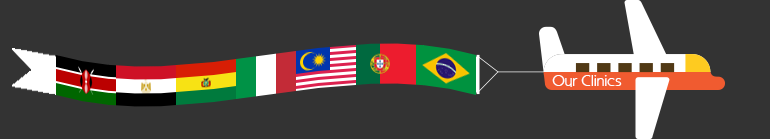
<style>
.page{position:relative;width:770px;height:139px;background:#333333}
.page>*{position:absolute;margin:0}
.t1{font:14px "KabelBook";letter-spacing:-0.025em;color:#ffffff}
</style>
<div class="page">
<p class="t1" style="left:552px;top:75px;width:70px;height:12px">Our Clinics</p>
</div>
